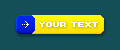
<style>
.page{position:relative;width:120px;height:50px;background:#144e56}
.page>*{position:absolute;margin:0}
.t1{font:10px "AuXDotBitC";letter-spacing:-0.1em;color:#ffffff;text-transform:uppercase;font-weight:bold}
</style>
<div class="page">
<p class="t1" style="left:39px;top:22px;width:59px;height:5px">your text</p>
</div>
